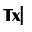
<style>
.page{position:relative;width:32px;height:32px;background:#ffffff}
.page>*{position:absolute;margin:0}
.t1{font:18px "BritannicBold";letter-spacing:-0.04em;color:#000000}
</style>
<div class="page">
<p class="t1" style="left:3px;top:9px;width:18px;height:12px">Tx</p>
</div>
